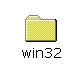
<style>
.page{position:relative;width:80px;height:80px;background:#ffffff}
.page>*{position:absolute;margin:0}
.t1{font:14px "MSReferenceSansSerif";color:#000000}
</style>
<div class="page">
<p class="t1" style="left:22px;top:48px;width:39px;height:10px">win32</p>
</div>
